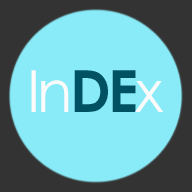
<style>
.page{position:relative;width:192px;height:192px;background:#89ebf7}
.page>*{position:absolute;margin:0}
.t1{font:58.3px "CenturyGothic";letter-spacing:-0.05em;color:#fdfafa}
.t2{font:58.3px "CenturyGothic-Bold";letter-spacing:-0.05em;color:#005263}
</style>
<div class="page">
<p class="t1" style="left:31px;top:70px;width:133px;height:42px">In<span class="t2">DE</span>x</p>
</div>
